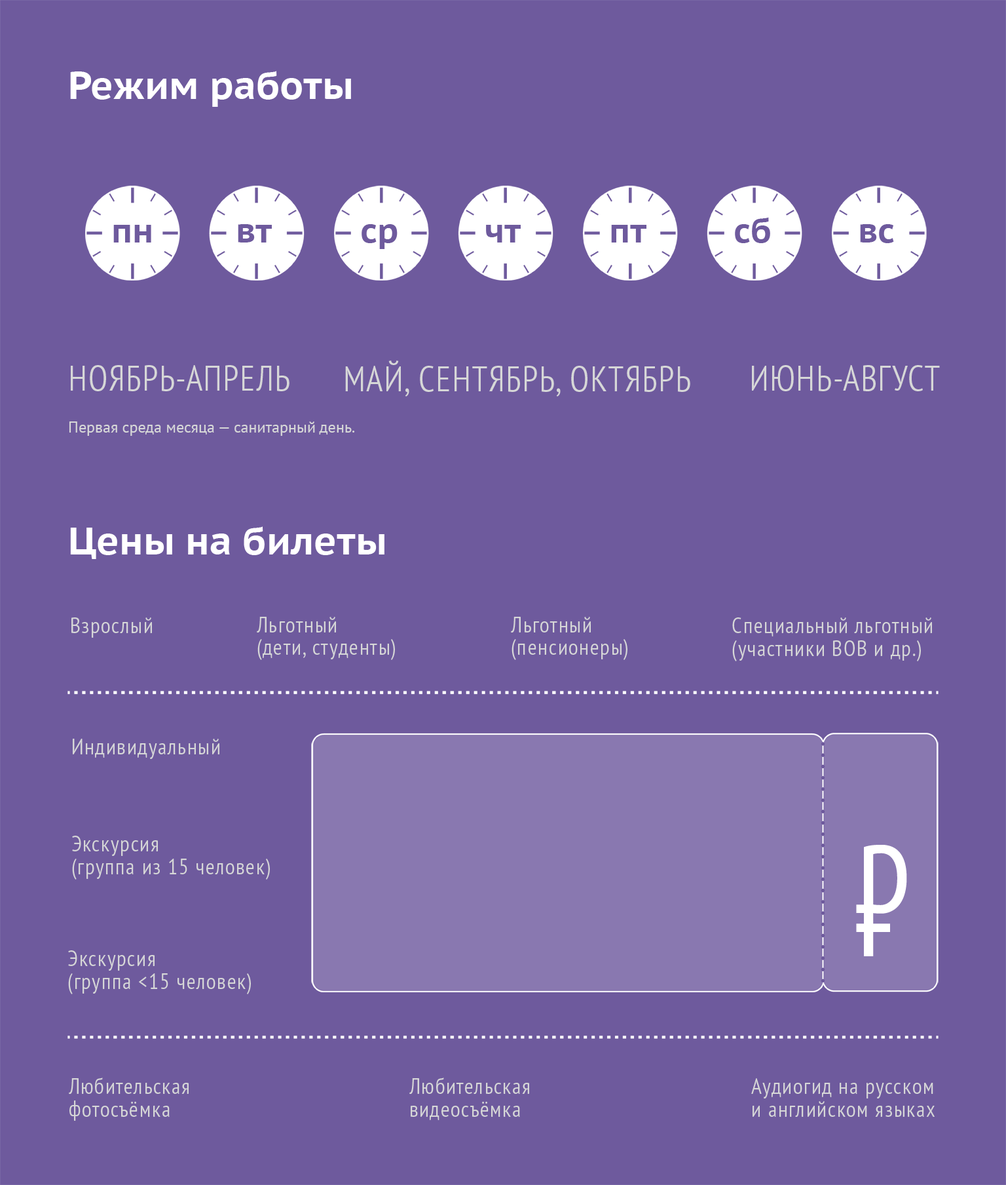
<style>
.page{position:relative;width:1006px;height:1185px;background:#6e5a9d}
.page>*{position:absolute;margin:0}
.t1{font:38.7px "PTSans-CaptionBold";color:#ffffff}
.t2{font:34px "PTSans-CaptionBold";color:#6e5a9d}
.t3{font:35.6px "PTSansPro-NarrowLight";letter-spacing:0.025em;color:#d6d7d7}
.t4{font:15.7px "PTSans-Regular";color:#d6d7d7}
.t5{font:22.3px "PTSansPro-NarrowLight";letter-spacing:0.05em;color:#d6d7d7}
.t6{font:22.3px/22.9px "PTSansPro-NarrowLight";letter-spacing:0.05em;color:#d6d7d7}
.t7{font:157.5px "PTSansPro-CondLight";letter-spacing:-0.04em;color:#ffffff}
</style>
<div class="page">
<p class="t1" style="left:70px;top:71px;width:281px;height:36px">Режим работы</p>
<p class="t2" style="left:735px;top:217px;width:36px;height:26px">сб</p>
<p class="t2" style="left:113px;top:225px;width:38px;height:17px">пн</p>
<p class="t2" style="left:238px;top:224px;width:34px;height:18px">вт</p>
<p class="t2" style="left:362px;top:224px;width:36px;height:25px">ср</p>
<p class="t2" style="left:486px;top:225px;width:35px;height:17px">чт</p>
<p class="t2" style="left:611px;top:225px;width:36px;height:17px">пт</p>
<p class="t2" style="left:860px;top:224px;width:34px;height:19px">вс</p>
<p class="t3" style="left:71px;top:365px;width:219px;height:26px">НОЯБРЬ-АПРЕЛЬ</p>
<p class="t3" style="left:345px;top:360px;width:346px;height:36px">МАЙ, СЕНТЯБРЬ, ОКТЯБРЬ</p>
<p class="t3" style="left:752px;top:365px;width:188px;height:26px">ИЮНЬ-АВГУСТ</p>
<p class="t4" style="left:69px;top:421px;width:286px;height:15px">Первая среда месяца — санитарный день.</p>
<p class="t1" style="left:70px;top:526px;width:315px;height:33px">Цены на билеты</p>
<p class="t5" style="left:71px;top:617px;width:81px;height:21px">Взрослый</p>
<p class="t6" style="left:257px;top:617px;width:138px;height:43px">Льготный <br>(дети, студенты)</p>
<p class="t6" style="left:511px;top:617px;width:117px;height:43px">Льготный <br>(пенсионеры)</p>
<p class="t6" style="left:733px;top:617px;width:199px;height:44px">Специальный льготный (участники ВОВ и др.)</p>
<p class="t5" style="left:73px;top:738px;width:147px;height:21px">Индивидуальный</p>
<p class="t6" style="left:72px;top:835px;width:198px;height:44px">Экскурсия<br>(группа из 15 человек)</p>
<p class="t7" style="left:856px;top:845px;width:52px;height:111px">⃊</p>
<p class="t6" style="left:68px;top:950px;width:183px;height:44px">Экскурсия<br>(группа &lt;15 человек)</p>
<p class="t6" style="left:69px;top:1077px;width:120px;height:44px">Любительская фотосъёмка</p>
<p class="t6" style="left:410px;top:1077px;width:119px;height:43px">Любительская видеосъёмка</p>
<p class="t6" style="left:752px;top:1078px;width:183px;height:39px">Аудиогид на русском <br>и английском языках</p>
</div>
